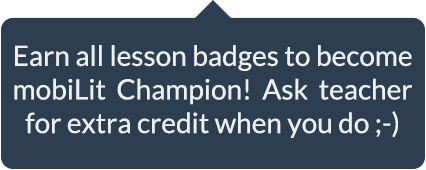
<style>
.page{position:relative;width:426px;height:170px;background:#2c3e50}
.page>*{position:absolute;margin:0}
.t1{font:28px "Lato-Regular";color:#ecf0f1}
</style>
<div class="page">
<p class="t1" style="left:14px;top:45px;width:398px;height:93px;text-align:justify">Earn all lesson badges to become mobiLit Champion! Ask teacher for extra credit when you do ;-)</p>
</div>
